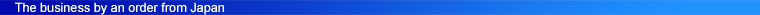
<style>
.page{position:relative;width:760px;height:15px}
.page>*{position:absolute;margin:0}
.t1{font:12.7px "ArialMT";color:#ffffff}
</style>
<div class="page">
<p class="t1" style="left:15px;top:2px;width:209px;height:13px">The business by an order from Japan</p>
</div>
